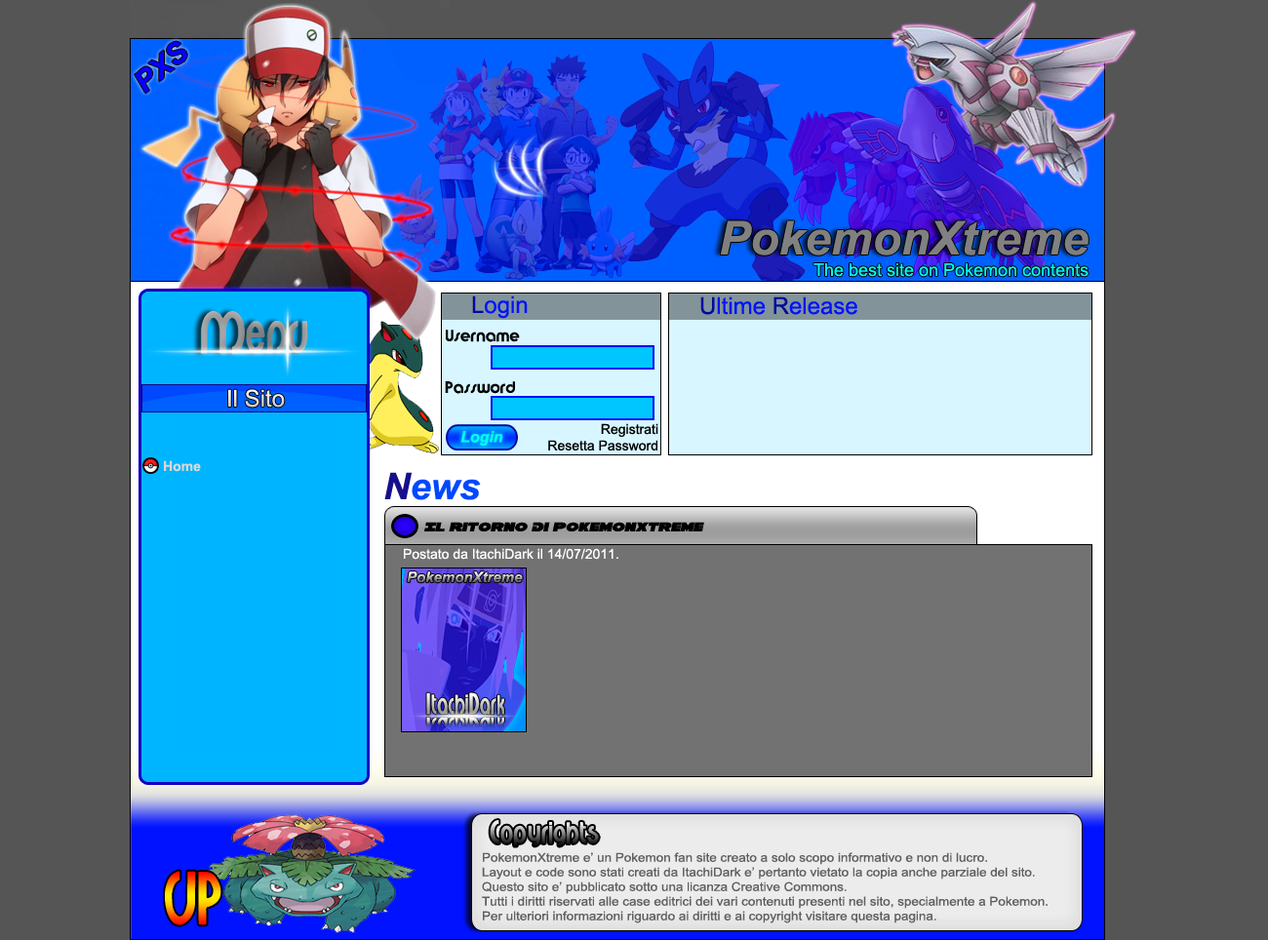
<style>
.page{position:relative;width:1268px;height:940px;background:#555555}
.page>*{position:absolute;margin:0}
.t1{font:29.3px "Arial-BoldItalicMT";color:#0600fd}
.t2{font:46.8px "Arial-BoldItalicMT";color:#808080}
.t3{font:17.6px "ArialMT";color:#00fff0}
.t4{font:23.4px "ArialMT";color:#0012ff}
.t5{font:23.4px "ArialMT";color:#000b9e}
.t6{font:46.8px "Minerva"}
.t7{font:13.7px "Brandish";color:#000000}
.t8{font:23.4px "ArialMT";color:#d7d7d7}
.t9{font:13.7px "ArialMT";color:#000000}
.t10{font:15.6px "Arial-BoldItalicMT";color:#00fff0}
.t11{font:13.7px "Arial-BoldMT";color:#d7d7d7}
.t12{font:37.1px "Arial-BoldItalicMT";color:#0048ff}
.t13{font:37.1px "Arial-BoldItalicMT";color:#170f8a}
.t14{font:13.7px "GalaxyItalic";color:#000000}
.t15{font:13.7px "ArialMT";color:#ffffff}
.t16{font:14.6px "Arial-BoldItalicMT"}
.t17{font:23.4px "Minerva"}
.t18{font:12.2px "ArialMT";color:#5f5f5f;scale:1.08 1}
.t19{font:58.5px "Minerva"}
</style>
<div class="page">
<p class="t1" style="left:135px;top:41px;width:52px;height:53px;rotate:-40deg">PXS</p>
<p class="t2" style="left:720px;top:220px;width:369px;height:36px">PokemonXtreme</p>
<p class="t3" style="left:814px;top:263px;width:275px;height:14px">The best site on Pokemon contents</p>
<p class="t4" style="left:472px;top:296px;width:56px;height:23px"><span class="t5">L</span>ogin</p>
<p class="t4" style="left:700px;top:297px;width:157px;height:18px"><span class="t5">U</span>ltime <span class="t5">R</span>elease</p>
<p class="t6" style="left:201px;top:310px;width:107px;height:45px">Menu</p>
<p class="t7" style="left:446px;top:330px;width:74px;height:12px">Username</p>
<p class="t8" style="left:228px;top:389px;width:57px;height:19px">Il Sito</p>
<p class="t7" style="left:445px;top:381px;width:70px;height:13px">Password</p>
<p class="t9" style="left:548px;top:423px;width:110px;height:28px;text-align:right">Registrati<br>Resetta Password</p>
<p class="t10" style="left:460px;top:431px;width:43px;height:15px">Login</p>
<p class="t11" style="left:164px;top:460px;width:37px;height:12px">Home</p>
<p class="t12" style="left:384px;top:472px;width:97px;height:28px"><span class="t13">N</span>ews</p>
<p class="t14" style="left:424px;top:522px;width:280px;height:10px">Il Ritorno Di PokemonXtreme</p>
<p class="t15" style="left:404px;top:548px;width:214px;height:12px">Postato da ItachiDark il 14/07/2011.</p>
<p class="t16" style="left:407px;top:572px;width:116px;height:11px">PokemonXtreme</p>
<p class="t17" style="left:426px;top:693px;width:78px;height:22px">ItachiDark</p>
<p class="t18" style="left:482px;top:853px;width:566px;height:71px">PokemonXtreme e’ un Pokemon fan site creato a solo scopo informativo e non di lucro.<br>Layout e code sono stati creati da ItachiDark e’ pertanto vietato la copia anche parziale del sito.<br>Questo sito e’ pubblicato sotto una licanza Creative Commons.<br>Tutti i diritti riservati alle case editrici dei vari contenuti presenti nel sito, specialmente a Pokemon.<br>Per ulteriori informazioni riguardo ai diritti e ai copyright visitare questa pagina.</p>
<p class="t19" style="left:165px;top:871px;width:56px;height:55px">UP</p>
</div>
